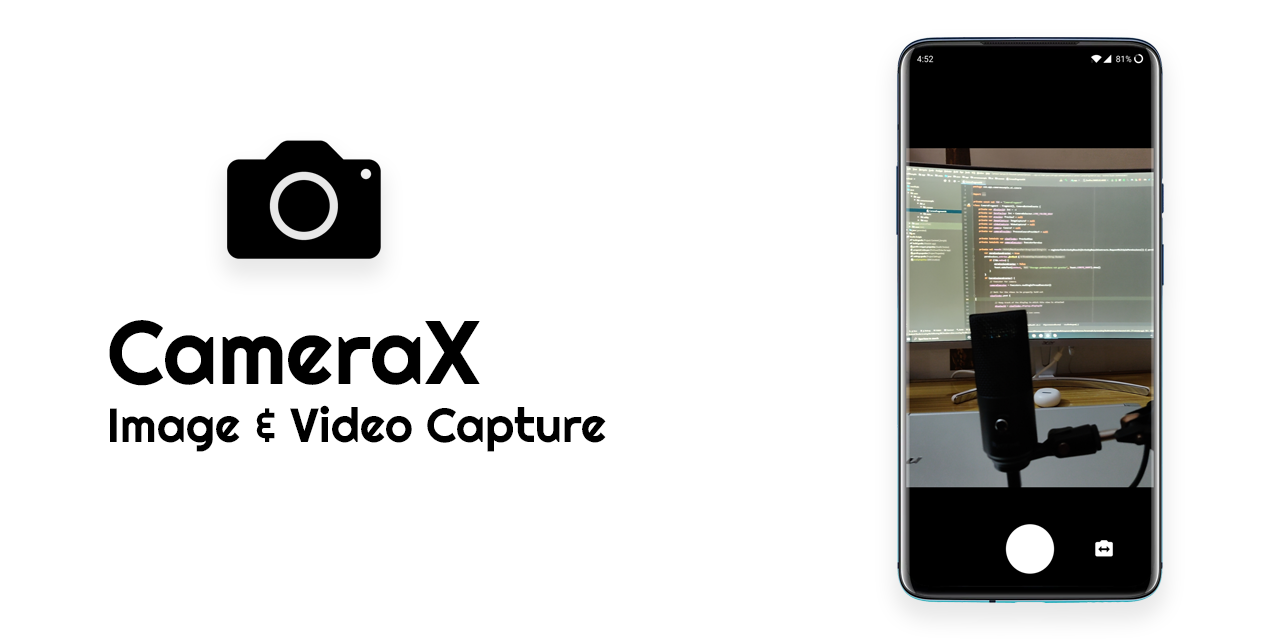
<style>
.page{position:relative;width:1280px;height:640px;background:#ffffff}
.page>*{position:absolute;margin:0}
.t1{font:48px "Righteous-Regular";color:#000000}
.t2{font:90px "Righteous-Regular";color:#000000}
</style>
<div class="page">
<p class="t1" style="left:109px;top:320px;width:497px;height:132px"><span class="t2">CameraX<br></span>Image &amp; Video Capture</p>
</div>
